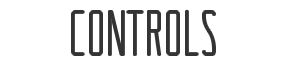
<style>
.page{position:relative;width:300px;height:70px;background:#ffffff}
.page>*{position:absolute;margin:0}
.t1{font:60px "Shket-Regular";letter-spacing:0.025em;color:#343434}
</style>
<div class="page">
<p class="t1" style="left:72px;top:10px;width:143px;height:45px">CONTROLS</p>
</div>
